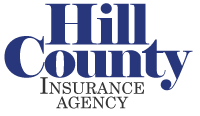
<style>
.page{position:relative;width:200px;height:116px;background:#ffffff}
.page>*{position:absolute;margin:0}
.t1{font:55.9px "Elephant-Regular";letter-spacing:-0.04em;color:#28377b}
.t2{font:23px "NewCenturySchlbk-Roman";color:#333333;font-variant:small-caps}
.t3{font:23px/12.5px "NewCenturySchlbk-Roman";color:#333333;font-variant:small-caps}
</style>
<div class="page">
<p class="t1" style="left:45px;top:3px;width:105px;height:42px">Hill</p>
<p class="t1" style="left:4px;top:36px;width:189px;height:55px">County</p>
<p class="t2" style="left:40px;top:77px;width:104px;height:32px;text-align:center">Insurance<br><span class="t3">agency</span></p>
</div>
